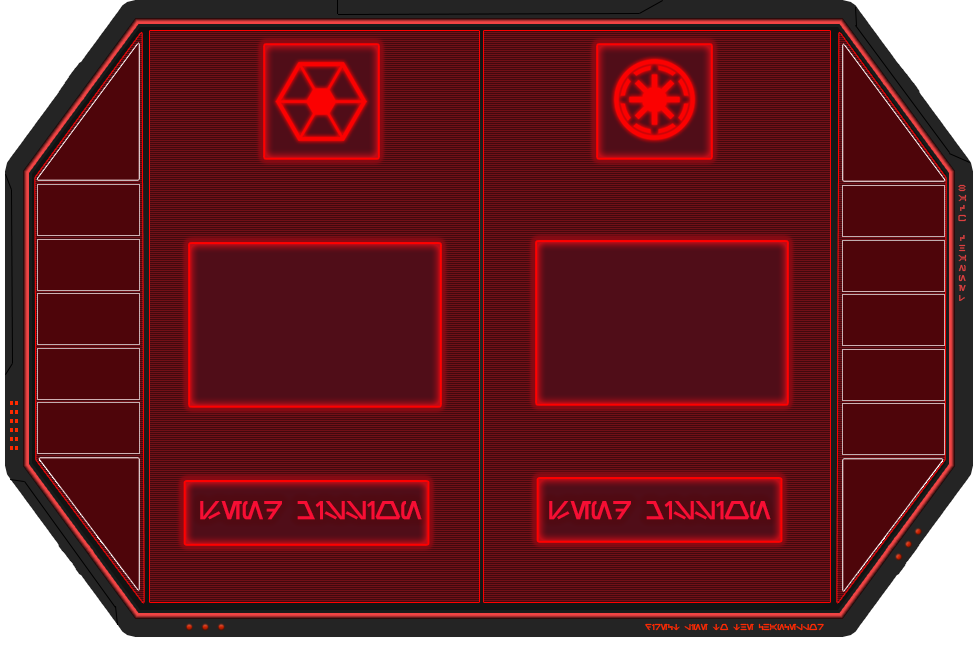
<style>
.page{position:relative;width:979px;height:645px}
.page>*{position:absolute;margin:0}
.t1{font:8.3px "Aurebesh-Bold";color:#dc4040}
.t2{font:25px "Aurebesh-Bold";color:#f10e34}
.t3{font:8.3px "Aurebesh-Bold";color:#ff2a00}
</style>
<div class="page">
<p class="t1" style="left:958px;top:184px;width:9px;height:117px;text-align:center">B<br>A<br>C<br>K<br><br>C<br>H<br>A<br>N<br>n<br>E<br>L</p>
<p class="t2" style="left:200px;top:501px;width:222px;height:19px">Send Mission</p>
<p class="t2" style="left:549px;top:501px;width:222px;height:19px">Send Mission</p>
<p class="t3" style="left:645px;top:623px;width:179px;height:8px">Direct line to the chancellor</p>
</div>
